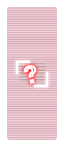
<style>
.page{position:relative;width:64px;height:148px;background:#ffffff}
.page>*{position:absolute;margin:0}
.t1{font:24px "REEJI-TaikoRiskGB-Flash";color:#ffffff}
</style>
<div class="page">
<p class="t1" style="left:23px;top:65px;width:14px;height:19px;rotate:-13deg">?</p>
</div>
